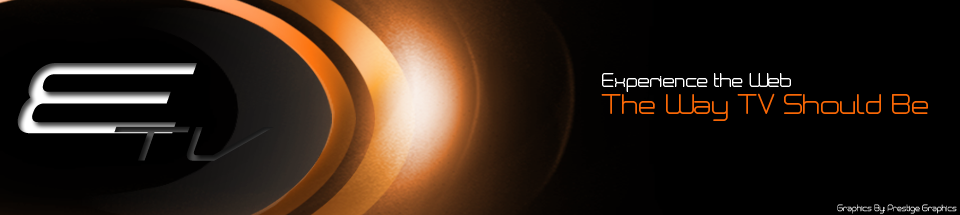
<style>
.page{position:relative;width:960px;height:215px;background:#000000}
.page>*{position:absolute;margin:0}
.t1{font:16.7px "Neogrey";color:#ffffff}
.t2{font:25px "Neogrey";color:#f86706}
</style>
<div class="page">
<p class="t1" style="left:602px;top:73px;width:189px;height:19px">Experience the Web</p>
<p class="t2" style="left:601px;top:93px;width:327px;height:28px">The Way TV Should Be</p>
</div>
